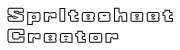
<style>
.page{position:relative;width:180px;height:50px;background:#ffffff}
.page>*{position:absolute;margin:0}
.t1{font:17.5px "AgencyFB-BlackExtended";letter-spacing:0.075em;font-weight:bold}
</style>
<div class="page">
<p class="t1" style="left:7px;top:7px;width:166px;height:36px">Spritesheet<br>Creator</p>
</div>
